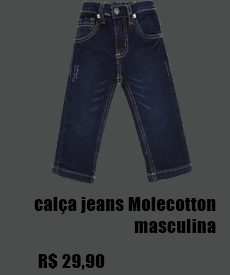
<style>
.page{position:relative;width:230px;height:275px;background:#4b4d4c}
.page>*{position:absolute;margin:0}
.t1{font:18px "Impact";letter-spacing:0.025em;color:#000000}
</style>
<div class="page">
<p class="t1" style="left:34px;top:197px;width:182px;height:36px;text-align:right">calça jeans Molecotton masculina</p>
<p class="t1" style="left:38px;top:253px;width:67px;height:17px">R$ 29,90</p>
</div>
